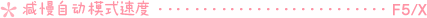
<style>
.page{position:relative;width:427px;height:18px;background:#ffffff}
.page>*{position:absolute;margin:0}
.t1{font:18px "¢è?";color:#ff93a5}
</style>
<div class="page">
<p class="t1" style="left:22px;top:0px;width:127px;height:16px">减慢自动模式速度</p>
</div>
